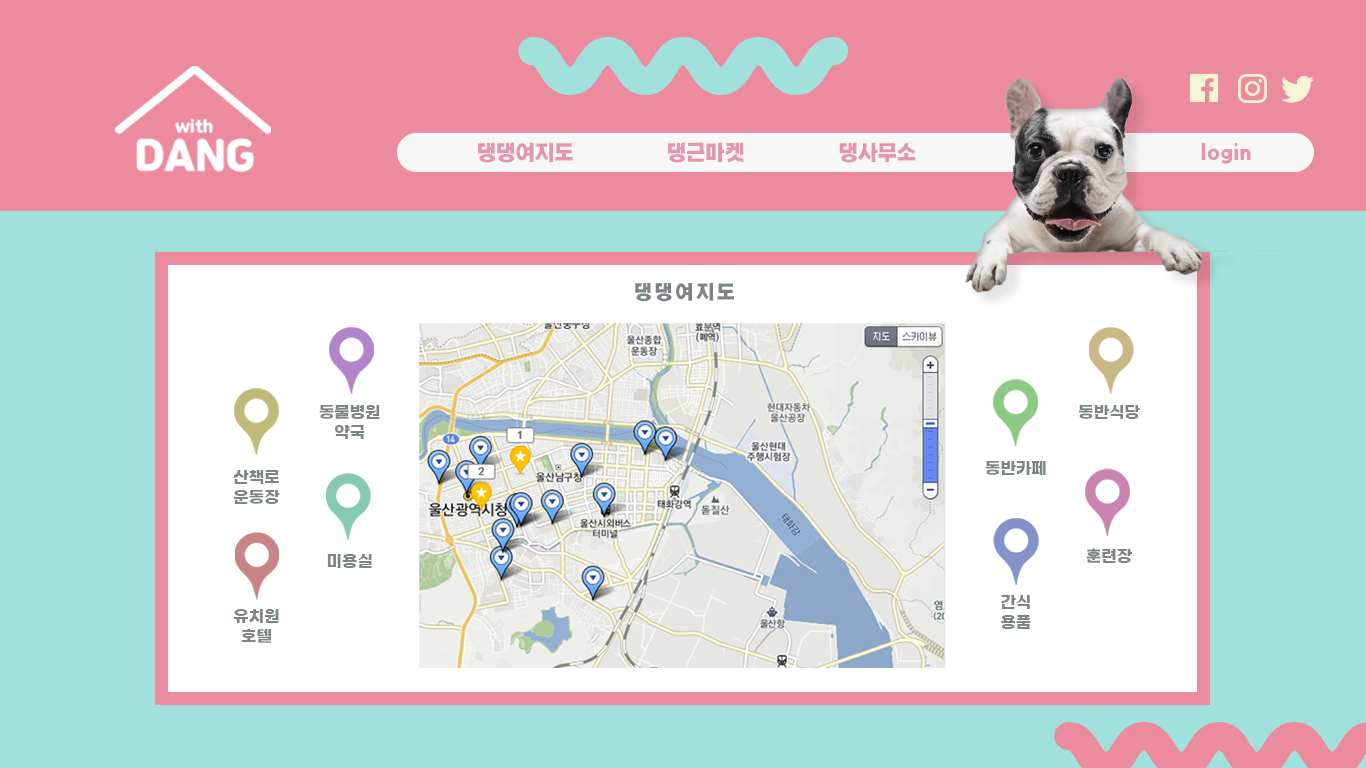
<style>
.page{position:relative;width:1366px;height:768px;background:#ed8b9e}
.page>*{position:absolute;margin:0}
.t1{font:19.8px "KOTRA_BOLD-Bold";color:#e496b0}
.t2{font:18.2px "KOTRA_BOLD-Bold";letter-spacing:0.16em;color:#7c8585}
.t3{font:16px/20px "GmarketSansTTFBold";color:#7c8585}
.t4{font:16px "GmarketSansTTFBold";color:#7c8585}
</style>
<div class="page">
<p class="t1" style="left:478px;top:142px;width:95px;height:21px">댕댕여지도</p>
<p class="t1" style="left:668px;top:142px;width:76px;height:21px">댕근마켓</p>
<p class="t1" style="left:839px;top:142px;width:77px;height:21px">댕사무소</p>
<p class="t1" style="left:1201px;top:143px;width:50px;height:21px">login</p>
<p class="t2" style="left:635px;top:283px;width:99px;height:19px">댕댕여지도</p>
<p class="t3" style="left:319px;top:405px;width:61px;height:34px;text-align:center">동물병원<br>약국</p>
<p class="t4" style="left:1079px;top:405px;width:61px;height:14px">동반식당</p>
<p class="t4" style="left:985px;top:461px;width:61px;height:14px">동반카페</p>
<p class="t3" style="left:234px;top:470px;width:46px;height:34px;text-align:center">산책로<br>운동장</p>
<p class="t4" style="left:327px;top:554px;width:45px;height:14px">미용실</p>
<p class="t4" style="left:1086px;top:548px;width:46px;height:15px">훈련장</p>
<p class="t3" style="left:1001px;top:595px;width:30px;height:34px;text-align:center">간식<br>용품</p>
<p class="t3" style="left:234px;top:609px;width:45px;height:34px;text-align:center">유치원<br>호텔</p>
</div>
